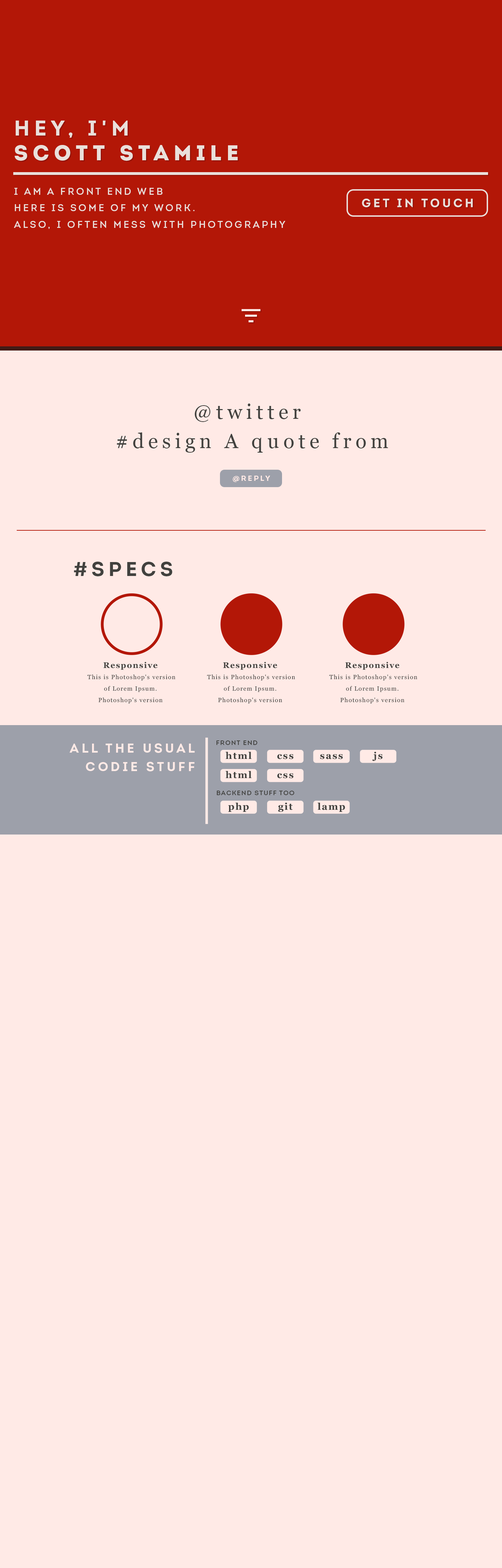
<style>
.page{position:relative;width:502px;height:1568px;background:#ffeae6}
.page>*{position:absolute;margin:0}
.t1{font:21.6px/25px "Intro";letter-spacing:0.2em;color:#eae0db;text-transform:uppercase}
.t2{font:21.6px/25px "Intro-Bold-Caps";letter-spacing:0.2em;color:#eae0db;text-transform:uppercase}
.t3{font:9.8px/16.6px "Intro-Regular-Caps";letter-spacing:0.2em;color:#eae0db}
.t4{font:9.8px/26px "Intro-Regular-Caps";letter-spacing:0.2em;color:#eae0db}
.t5{font:12.1px "Intro-Bold-Caps";letter-spacing:0.2em;color:#eae0db}
.t6{font:20.4px/29.2px "Georgia";letter-spacing:0.2em;color:#41413e}
.t7{font:7.4px "Intro-Bold-Caps";letter-spacing:0.2em;color:#ffeae6}
.t8{font:20.1px "Intro-Bold-Caps";letter-spacing:0.2em;color:#41413e;text-transform:uppercase}
.t9{font:6px/11.5px "Georgia";letter-spacing:0.1em;color:#41413e}
.t10{font:8px/11.5px "Georgia-Bold";letter-spacing:0.1em;color:#41413e}
.t11{font:12.9px/18.5px "Intro-Bold-Caps";letter-spacing:0.2em;color:#ffeae6}
.t12{font:6.4px "Intro-Regular-Caps";letter-spacing:0.1em;color:#41413e}
.t13{font:9.5px "Georgia-Bold";letter-spacing:0.1em;color:#41413e}
</style>
<div class="page">
<p class="t1" style="left:15px;top:121px;width:223px;height:40px"><span class="t2">Hey, i'm<br></span>Scott StamilE</p>
<p class="t3" style="left:14px;top:188px;width:271px;height:41px"><span class="t4">I am a front end web<br></span>here is some of my work.  <br>Also, I often mess with photography</p>
<p class="t5" style="left:362px;top:198px;width:110px;height:9px">Get in Touch</p>
<p class="t6" style="left:117px;top:403px;width:271px;height:50px;text-align:center">@twitter <br>#design A quote from</p>
<p class="t7" style="left:232px;top:476px;width:38px;height:6px">@reply</p>
<p class="t8" style="left:74px;top:561px;width:98px;height:15px">#Specs</p>
<p class="t9" style="left:87px;top:662px;width:88px;height:42px;text-align:center"><span class="t10">Responsive<br></span> This is Photoshop's version<br>of Lorem Ipsum.<br>Photoshop's version</p>
<p class="t9" style="left:207px;top:662px;width:88px;height:42px;text-align:center"><span class="t10">Responsive<br></span> This is Photoshop's version<br>of Lorem Ipsum.<br>Photoshop's version</p>
<p class="t9" style="left:329px;top:662px;width:88px;height:42px;text-align:center"><span class="t10">Responsive<br></span> This is Photoshop's version<br>of Lorem Ipsum.<br>Photoshop's version</p>
<p class="t11" style="left:69px;top:743px;width:126px;height:28px;text-align:right">All the usual<br>codie stuff</p>
<p class="t12" style="left:216px;top:740px;width:41px;height:5px">front end</p>
<p class="t13" style="left:225px;top:752px;width:27px;height:7px">html</p>
<p class="t13" style="left:277px;top:754px;width:16px;height:5px">css</p>
<p class="t13" style="left:320px;top:754px;width:23px;height:5px">sass</p>
<p class="t13" style="left:372px;top:752px;width:10px;height:9px">js</p>
<p class="t13" style="left:225px;top:771px;width:27px;height:7px">html</p>
<p class="t13" style="left:277px;top:773px;width:16px;height:5px">css</p>
<p class="t12" style="left:217px;top:791px;width:77px;height:4px">backend stuff too</p>
<p class="t13" style="left:228px;top:802px;width:21px;height:10px">php</p>
<p class="t13" style="left:278px;top:802px;width:15px;height:10px">git</p>
<p class="t13" style="left:317px;top:802px;width:28px;height:10px">lamp</p>
</div>
